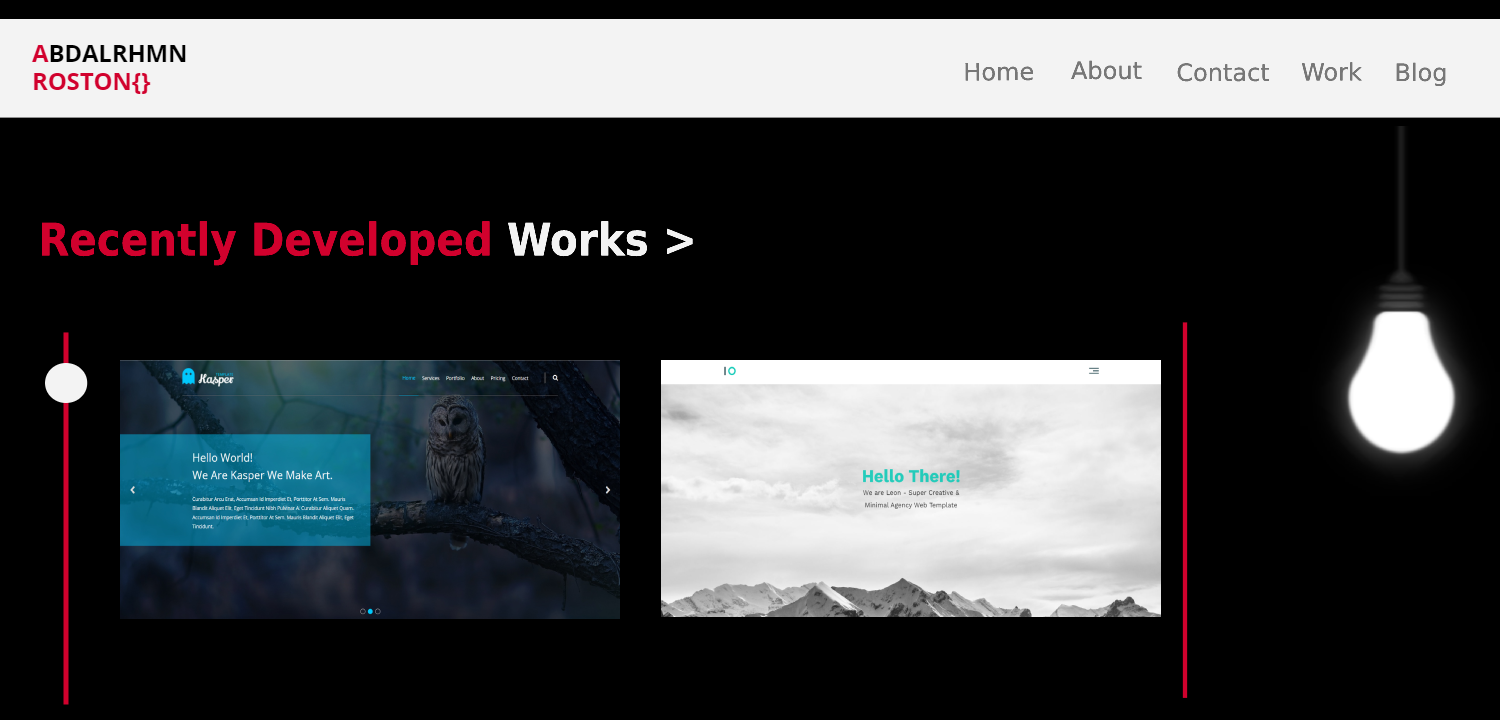
<style>
.page{position:relative;width:1500px;height:720px;background:#000000}
.page>*{position:absolute;margin:0}
.t1{font:24px "DejaVuSans";color:#777777}
.t2{font:45px "DejaVuSansCondensed-Bold";color:#d1012d}
.t3{font:45px "DejaVuSansCondensed-Bold";color:#f3f3f3}
</style>
<div class="page">
<p class="t1" style="left:965px;top:62px;width:68px;height:19px">Home</p>
<p class="t1" style="left:1071px;top:60px;width:71px;height:20px">About</p>
<p class="t1" style="left:1177px;top:63px;width:93px;height:19px">Contact</p>
<p class="t1" style="left:1301px;top:62px;width:61px;height:19px">Work</p>
<p class="t1" style="left:1396px;top:62px;width:50px;height:24px">Blog</p>
<p class="t2" style="left:41px;top:221px;width:652px;height:45px">Recently Developed <span class="t3">Works &gt;</span></p>
</div>
